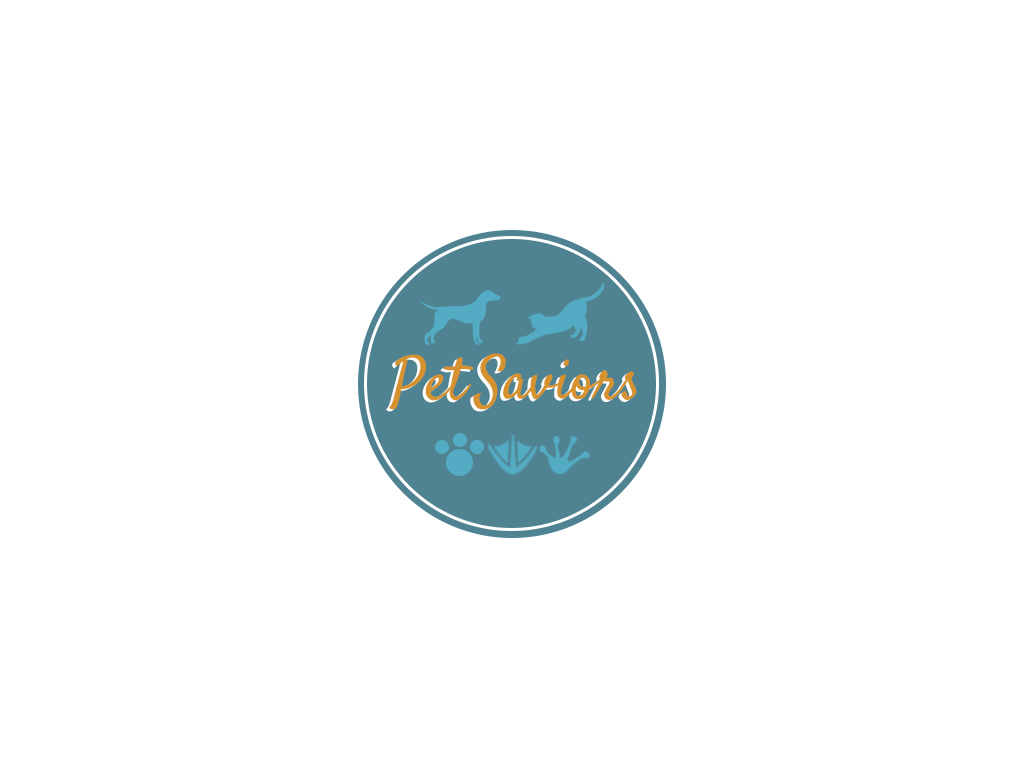
<style>
.page{position:relative;width:1024px;height:768px;background:#ffffff}
.page>*{position:absolute;margin:0}
.t1{font:60px "Satisfy";color:#d79331}
.t2{font:60px "Satisfy"}
.t3{font:60px "Satisfy";color:#d79230}
</style>
<div class="page">
<p class="t1" style="left:473px;top:353px;width:164px;height:57px">Saviors</p>
<p class="t2" style="left:386px;top:356px;width:85px;height:56px">Pet</p>
<p class="t3" style="left:389px;top:354px;width:85px;height:56px">Pet</p>
<p class="t2" style="left:470px;top:355px;width:164px;height:57px">Saviors</p>
</div>
